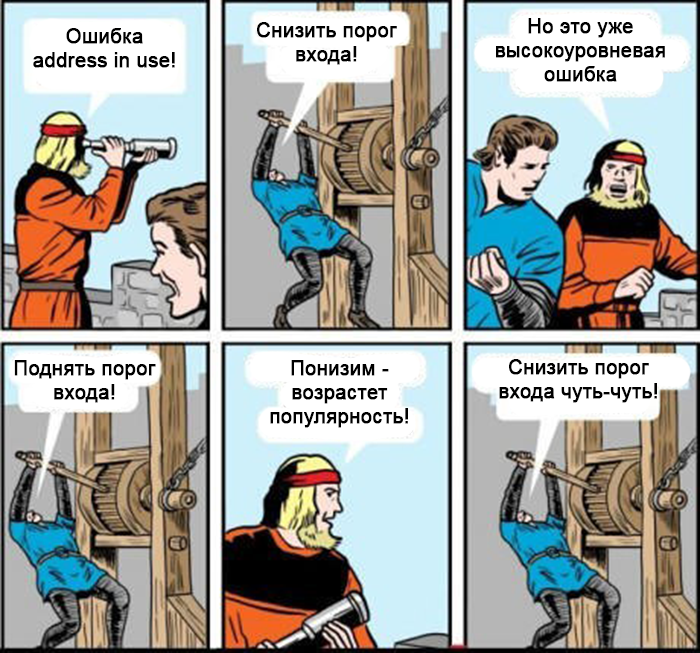
<style>
.page{position:relative;width:700px;height:653px}
.page>*{position:absolute;margin:0}
.t1{font:20px "ArialMT";color:#000000;font-weight:bold}
</style>
<div class="page">
<p class="t1" style="left:33px;top:28px;width:142px;height:40px;text-align:center">Ошибка<br>address in use!</p>
<p class="t1" style="left:257px;top:22px;width:140px;height:43px;text-align:center">Снизить порог<br>входа!</p>
<p class="t1" style="left:496px;top:18px;width:169px;height:64px;text-align:center">Но это уже<br>высокоуровневая<br>ошибка</p>
<p class="t1" style="left:14px;top:360px;width:142px;height:43px;text-align:center">Поднять порог<br>входа!</p>
<p class="t1" style="left:270px;top:360px;width:138px;height:68px;text-align:center">Понизим -<br>возрастет<br>популярность!</p>
<p class="t1" style="left:499px;top:359px;width:158px;height:44px;text-align:center">Снизить порог<br>входа чуть-чуть!</p>
</div>
